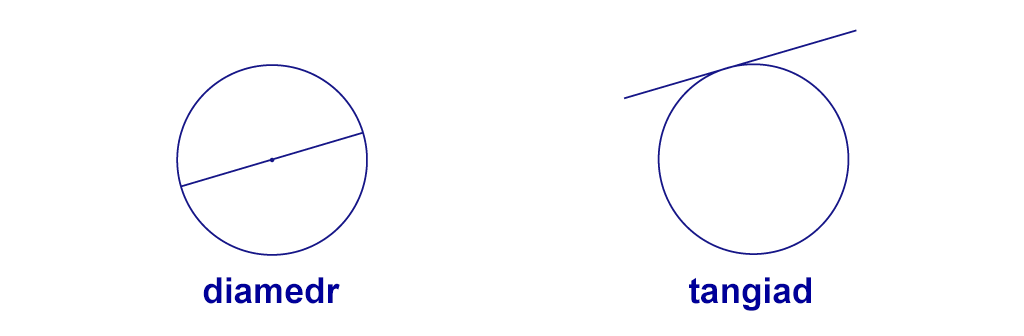
<style>
.page{position:relative;width:1024px;height:336px;background:#ffffff}
.page>*{position:absolute;margin:0}
.t1{font:36px "Arial-BoldMT";color:#000099}
</style>
<div class="page">
<p class="t1" style="left:203px;top:277px;width:137px;height:27px">diamedr</p>
<p class="t1" style="left:689px;top:277px;width:122px;height:34px">tangiad</p>
</div>
